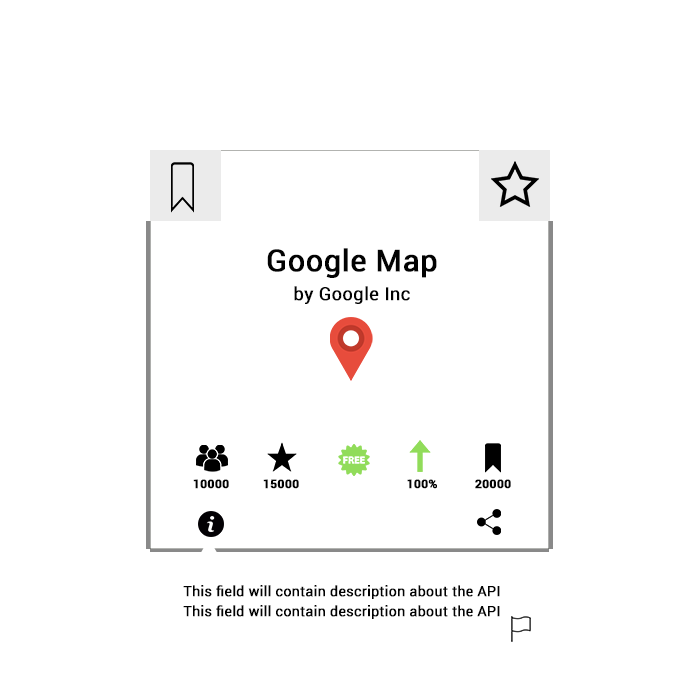
<style>
.page{position:relative;width:700px;height:700px;background:#ffffff}
.page>*{position:absolute;margin:0}
.t1{font:30px "Roboto-Regular";letter-spacing:0.005em;color:#020202;font-weight:bold}
.t2{font:18px "Roboto-Regular";letter-spacing:0.005em;color:#020202;font-weight:bold}
.t3{font:12px "Roboto-Bold";letter-spacing:0.005em;color:#020202;font-weight:bold}
.t4{font:14px "Roboto-Regular";letter-spacing:0.005em;color:#020202;font-weight:bold}
</style>
<div class="page">
<p class="t1" style="left:267px;top:248px;width:170px;height:30px">Google Map</p>
<p class="t2" style="left:294px;top:286px;width:116px;height:18px">by Google Inc</p>
<p class="t3" style="left:193px;top:479px;width:36px;height:10px">10000</p>
<p class="t3" style="left:263px;top:479px;width:36px;height:10px">15000</p>
<p class="t3" style="left:407px;top:479px;width:30px;height:10px">100%</p>
<p class="t3" style="left:475px;top:479px;width:36px;height:10px">20000</p>
<p class="t4" style="left:183px;top:585px;width:317px;height:14px">This field will contain description about the API</p>
<p class="t4" style="left:183px;top:605px;width:317px;height:14px">This field will contain description about the API</p>
</div>
